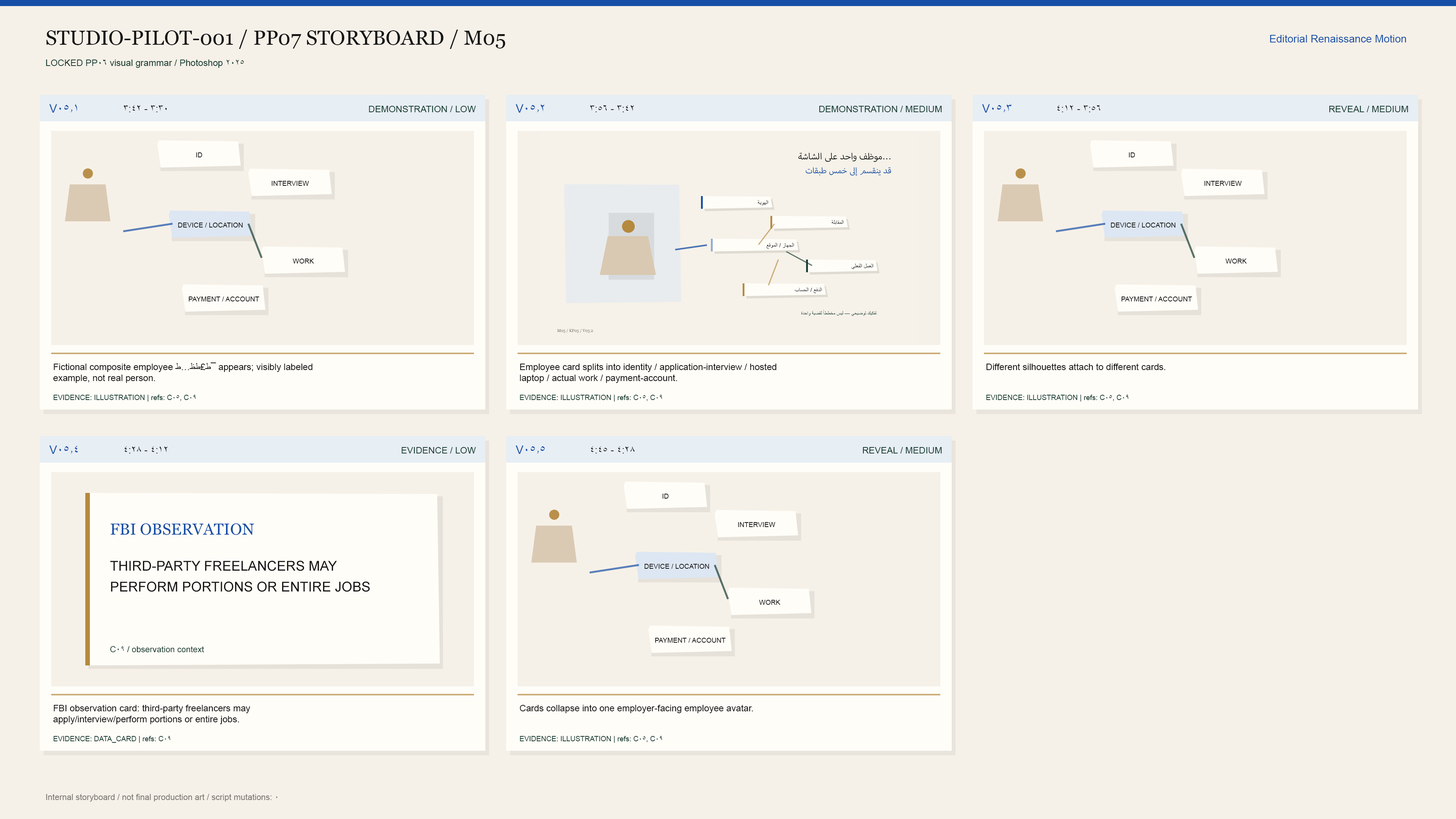
<style>
.page{position:relative;width:1456px;height:819px;background:#f6f1e8}
.page>*{position:absolute;margin:0}
.t1{font:20.5px "Georgia";color:#151515}
.t2{font:10.6px "ArialMT";color:#174fa6}
.t3{font:9.1px "ArialMT";color:#173c32}
.t4{font:11.8px "ArialMT";color:#174fa6}
.t5{font:9.9px "ArialMT";color:#151515}
.t6{font:6.8px "ArialMT";color:#151515}
.t7{font:23.3px "ArialMT";color:#b58a3e}
.t8{font:9.1px "ArialMT";color:#151515}
.t9{font:7.2px "ArialMT";color:#173c32}
.t10{font:15.9px "Georgia";color:#174fa6}
.t11{font:13.6px "ArialMT";color:#151515}
.t12{font:8.3px "ArialMT";color:#173c32}
.t13{font:8.3px "ArialMT";color:#7b7974}
</style>
<div class="page">
<p class="t1" style="left:46px;top:30px;width:459px;height:19px">STUDIO-PILOT-001 / PP07 STORYBOARD / M05</p>
<p class="t2" style="left:1270px;top:35px;width:136px;height:7px">Editorial Renaissance Motion</p>
<p class="t3" style="left:46px;top:59px;width:198px;height:9px">LOCKED PP06 visual grammar / Photoshop 2025</p>
<p class="t4" style="left:49px;top:104px;width:28px;height:9px">V05.1</p>
<p class="t5" style="left:124px;top:105px;width:43px;height:7px">3:30 - 3:42</p>
<p class="t3" style="left:369px;top:106px;width:107px;height:6px">DEMONSTRATION / LOW</p>
<p class="t4" style="left:516px;top:104px;width:28px;height:9px">V05.2</p>
<p class="t5" style="left:590px;top:105px;width:44px;height:7px">3:42 - 3:56</p>
<p class="t3" style="left:819px;top:106px;width:123px;height:6px">DEMONSTRATION / MEDIUM</p>
<p class="t4" style="left:982px;top:104px;width:30px;height:9px">V05.3</p>
<p class="t5" style="left:1057px;top:105px;width:43px;height:7px">3:56 - 4:12</p>
<p class="t3" style="left:1329px;top:106px;width:79px;height:6px">REVEAL / MEDIUM</p>
<p class="t6" style="left:196px;top:152px;width:6px;height:5px">ID</p>
<p class="t6" style="left:1129px;top:152px;width:6px;height:5px">ID</p>
<p class="t7" style="left:83px;top:168px;width:10px;height:11px;opacity:0.95">●</p>
<p class="t7" style="left:1015px;top:168px;width:11px;height:11px;opacity:0.95">●</p>
<p class="t6" style="left:271px;top:181px;width:38px;height:5px">INTERVIEW</p>
<p class="t6" style="left:1204px;top:181px;width:38px;height:5px">INTERVIEW</p>
<p class="t6" style="left:178px;top:223px;width:65px;height:4px">DEVICE / LOCATION</p>
<p class="t6" style="left:1111px;top:223px;width:64px;height:4px">DEVICE / LOCATION</p>
<p class="t6" style="left:293px;top:259px;width:21px;height:5px">WORK</p>
<p class="t6" style="left:1225px;top:259px;width:22px;height:5px">WORK</p>
<p class="t6" style="left:189px;top:297px;width:70px;height:4px">PAYMENT / ACCOUNT</p>
<p class="t6" style="left:1122px;top:297px;width:70px;height:4px">PAYMENT / ACCOUNT</p>
<p class="t8" style="left:53px;top:362px;width:259px;height:21px">Fictional composite employee ط£ط­ظ…ط¯ appears; visibly labeled<br>example, not real person.</p>
<p class="t8" style="left:520px;top:363px;width:257px;height:20px">Employee card splits into identity / application-interview / hosted<br>laptop / actual work / payment-account.</p>
<p class="t8" style="left:986px;top:363px;width:180px;height:7px">Different silhouettes attach to different cards.</p>
<p class="t9" style="left:53px;top:395px;width:143px;height:7px">EVIDENCE: ILLUSTRATION | refs: C05, C09</p>
<p class="t9" style="left:520px;top:395px;width:142px;height:7px">EVIDENCE: ILLUSTRATION | refs: C05, C09</p>
<p class="t9" style="left:986px;top:395px;width:142px;height:7px">EVIDENCE: ILLUSTRATION | refs: C05, C09</p>
<p class="t4" style="left:49px;top:446px;width:29px;height:8px">V05.4</p>
<p class="t5" style="left:124px;top:446px;width:44px;height:7px">4:12 - 4:28</p>
<p class="t3" style="left:402px;top:447px;width:74px;height:6px">EVIDENCE / LOW</p>
<p class="t4" style="left:516px;top:446px;width:29px;height:8px">V05.5</p>
<p class="t5" style="left:591px;top:446px;width:44px;height:7px">4:28 - 4:45</p>
<p class="t3" style="left:863px;top:447px;width:79px;height:6px">REVEAL / MEDIUM</p>
<p class="t6" style="left:662px;top:494px;width:7px;height:5px">ID</p>
<p class="t7" style="left:549px;top:510px;width:10px;height:10px;opacity:0.95">●</p>
<p class="t10" style="left:110px;top:523px;width:144px;height:12px">FBI OBSERVATION</p>
<p class="t6" style="left:738px;top:522px;width:37px;height:5px">INTERVIEW</p>
<p class="t11" style="left:110px;top:560px;width:227px;height:11px">THIRD-PARTY FREELANCERS MAY</p>
<p class="t6" style="left:645px;top:564px;width:64px;height:5px">DEVICE / LOCATION</p>
<p class="t11" style="left:111px;top:581px;width:259px;height:11px">PERFORM PORTIONS OR ENTIRE JOBS</p>
<p class="t6" style="left:759px;top:600px;width:21px;height:5px">WORK</p>
<p class="t6" style="left:655px;top:638px;width:71px;height:5px">PAYMENT / ACCOUNT</p>
<p class="t12" style="left:110px;top:646px;width:94px;height:7px">C09 / observation context</p>
<p class="t8" style="left:53px;top:704px;width:197px;height:20px">FBI observation card: third-party freelancers may<br>apply/interview/perform portions or entire jobs.</p>
<p class="t8" style="left:520px;top:704px;width:233px;height:9px">Cards collapse into one employer-facing employee avatar.</p>
<p class="t9" style="left:53px;top:736px;width:118px;height:7px">EVIDENCE: DATA_CARD | refs: C09</p>
<p class="t9" style="left:520px;top:736px;width:142px;height:7px">EVIDENCE: ILLUSTRATION | refs: C05, C09</p>
<p class="t13" style="left:46px;top:794px;width:232px;height:8px">Internal storyboard / not final production art / script mutations: 0</p>
</div>
